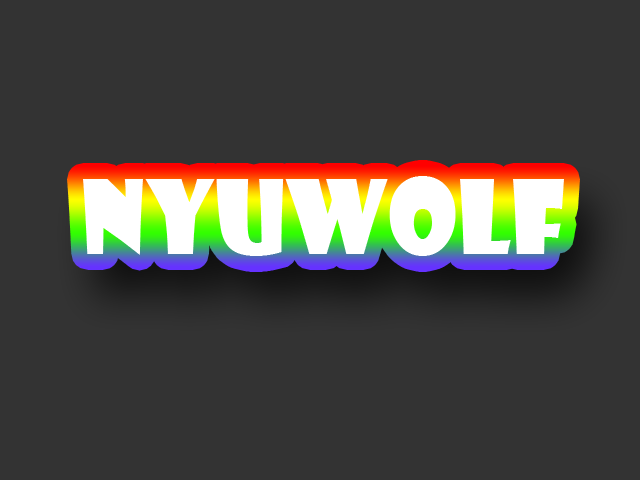
<style>
.page{position:relative;width:640px;height:480px;background:#333333}
.page>*{position:absolute;margin:0}
.t1{font:100px "ShowcardGothic-Reg";color:#ffffff}
</style>
<div class="page">
<p class="t1" style="left:83px;top:176px;width:481px;height:80px">Nyuwolf</p>
</div>
